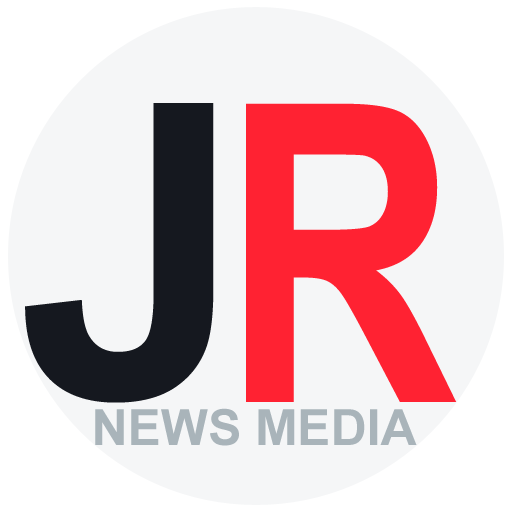
<style>
.page{position:relative;width:512px;height:512px;background:#f5f6f7}
.page>*{position:absolute;margin:0}
.t1{font:410.6px "Arial-BoldMT";color:#15181f}
.t2{font:415.8px "Arial-BoldMT";color:#ff2232;scale:0.79 1}
.t3{font:50px "Arial-BoldMT";color:#a9b4ba}
</style>
<div class="page">
<p class="t1" style="left:25px;top:103px;width:189px;height:300px">J</p>
<p class="t2" style="left:246px;top:103px;width:211px;height:299px">R</p>
<p class="t3" style="left:95px;top:408px;width:322px;height:38px">NEWS MEDIA</p>
</div>
